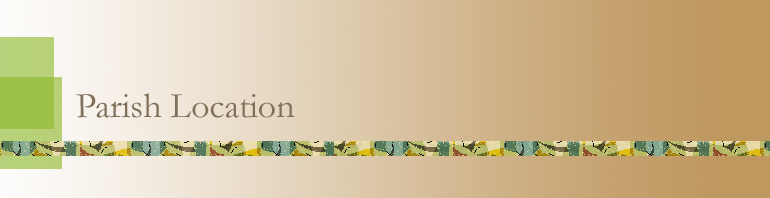
<style>
.page{position:relative;width:770px;height:198px}
.page>*{position:absolute;margin:0}
.t1{font:36px "Garamond";color:#807059}
</style>
<div class="page">
<p class="t1" style="left:76px;top:93px;width:219px;height:25px">Parish Location</p>
</div>
